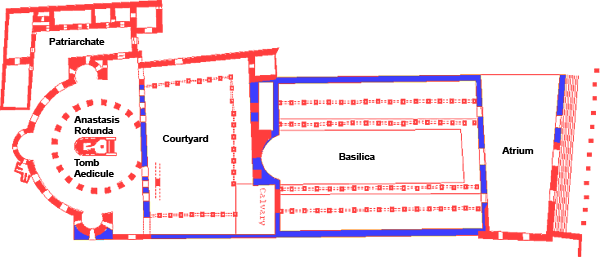
<style>
.page{position:relative;width:600px;height:257px;background:#ffffff}
.page>*{position:absolute;margin:0}
.t1{font:9.6px "Arial-BoldMT";color:#000000}
</style>
<div class="page">
<p class="t1" style="left:49px;top:38px;width:56px;height:7px">Patriarchate</p>
<p class="t1" style="left:74px;top:116px;width:46px;height:18px">Anastasis<br>Rotunda</p>
<p class="t1" style="left:162px;top:135px;width:47px;height:9px">Courtyard</p>
<p class="t1" style="left:502px;top:147px;width:32px;height:7px">Atrium</p>
<p class="t1" style="left:74px;top:159px;width:40px;height:18px">Tomb<br>Aedicule</p>
<p class="t1" style="left:339px;top:153px;width:36px;height:7px">Basilica</p>
</div>
